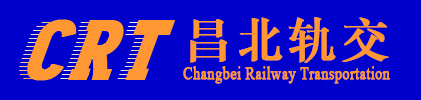
<style>
.page{position:relative;width:421px;height:100px;background:#0000cc}
.page>*{position:absolute;margin:0}
.t1{font:18px/48px "TimesNewRomanPSMT";color:#ff9833;font-weight:bold;scale:0.8 1}
.t2{font:48px/48px "STZhongsong";letter-spacing:0.06em;color:#ff9833;font-weight:bold}
</style>
<div class="page">
<p class="t1" style="left:183px;top:17px;width:207px;height:67px"><span class="t2">昌北轨交<br></span>Changbei Railway Transportation</p>
</div>
